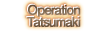
<style>
.page{position:relative;width:107px;height:31px;background:#ffffff}
.page>*{position:absolute;margin:0}
.t1{font:13px/12px "FutoGoB101Pr5-Bold";letter-spacing:-0.08em;color:#7c664e;font-weight:bold}
</style>
<div class="page">
<p class="t1" style="left:27px;top:4px;width:54px;height:23px;text-align:center">Operation<br>Tatsumaki</p>
</div>
